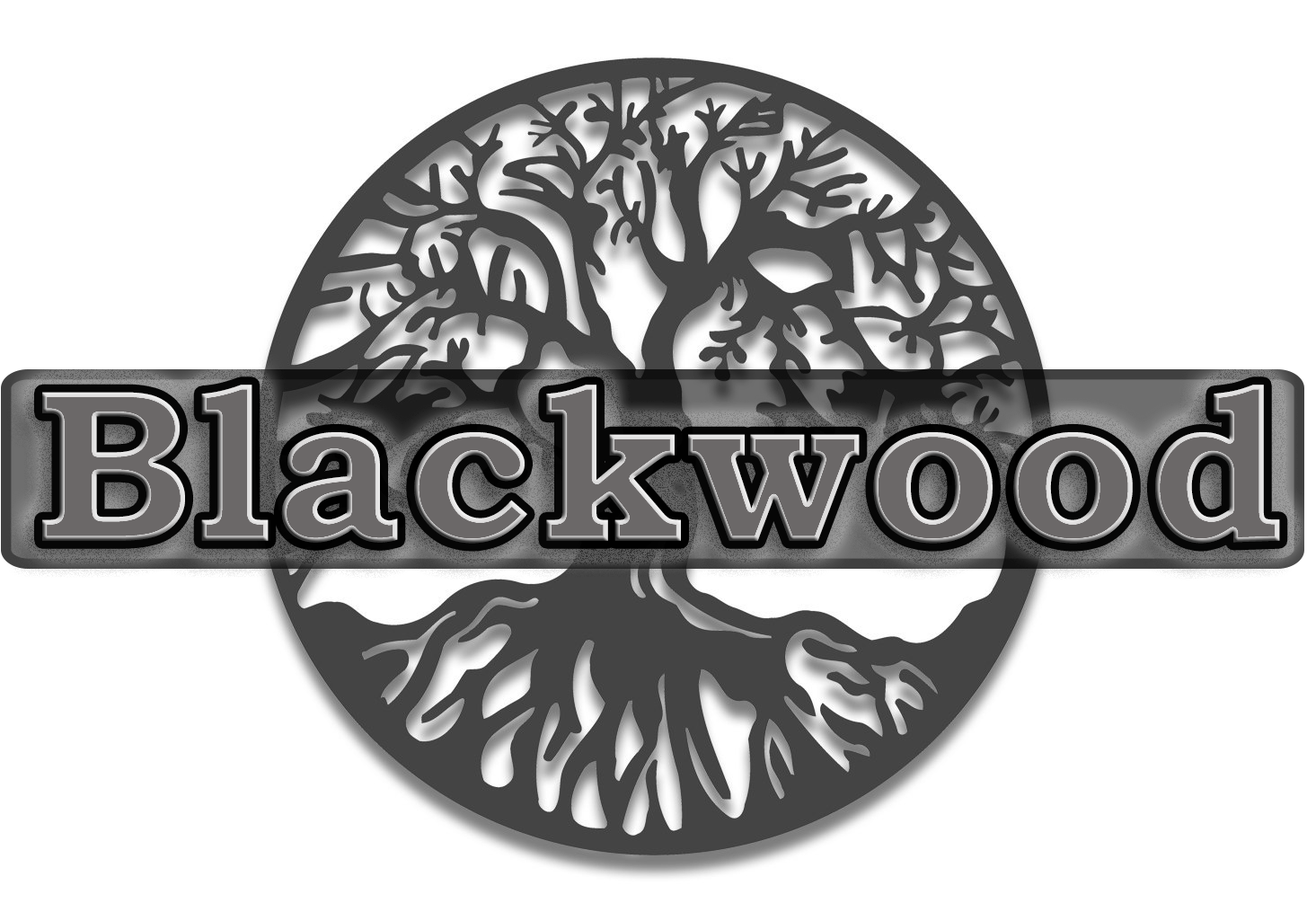
<style>
.page{position:relative;width:1307px;height:912px;background:#ffffff}
.page>*{position:absolute;margin:0}
.t1{font:217.2px "BookmanOldStyle-Bold";letter-spacing:0.025em;color:#6b6868}
</style>
<div class="page">
<p class="t1" style="left:42px;top:385px;width:1238px;height:159px">Blackwood</p>
</div>
